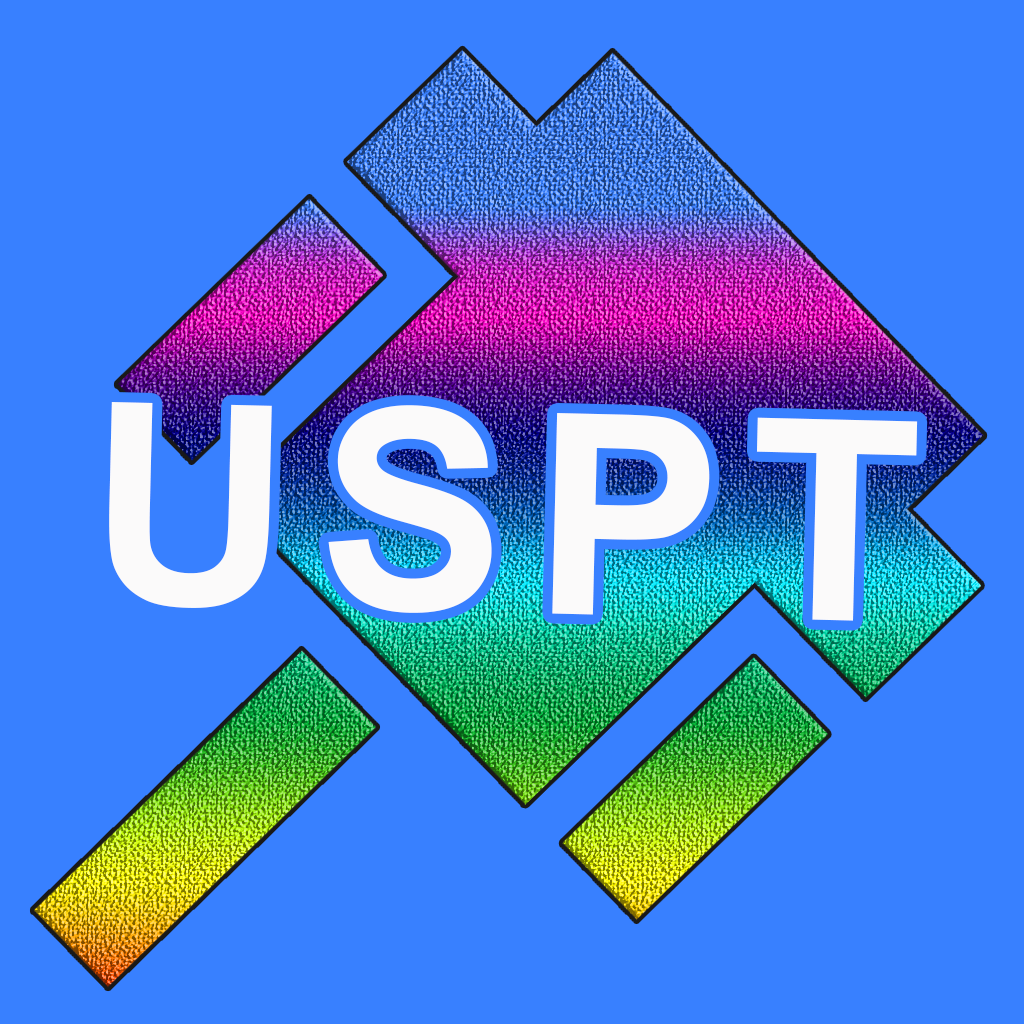
<style>
.page{position:relative;width:1024px;height:1024px;background:#3880ff}
.page>*{position:absolute;margin:0}
.t1{font:280px "Arial-BoldMT";letter-spacing:0.1em;color:#fbfafa}
</style>
<div class="page">
<p class="t1" style="left:109px;top:402px;width:809px;height:219px;rotate:1deg">USPT</p>
</div>
